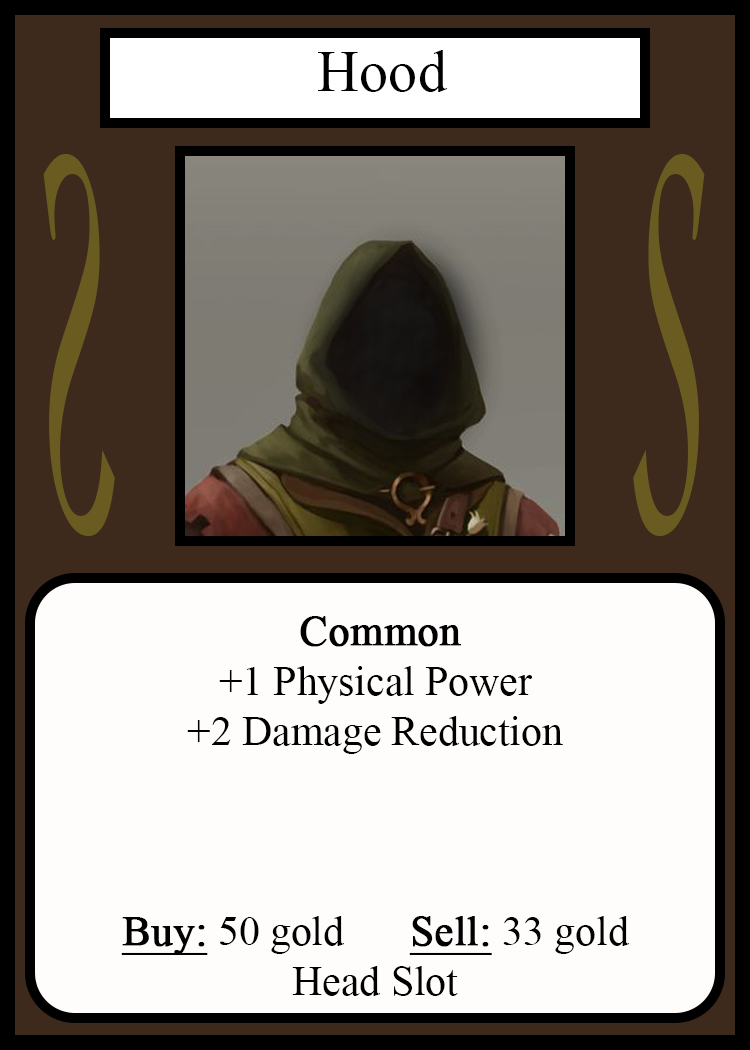
<style>
.page{position:relative;width:750px;height:1050px;background:#fffcfc}
.page>*{position:absolute;margin:0}
.t1{font:58.3px "TimesNewRomanPSMT";color:#010101}
.t2{font:548.5px "Apple-Chancery";color:#6a5c21;scale:0.27 1}
.t3{font:548.2px "Apple-Chancery";color:#6a5c21;scale:0.27 1}
.t4{font:41.7px "TimesNewRomanPSMT";color:#000000}
.t5{font:41.7px "TimesNewRomanPSMT";color:#000000;font-weight:bold}
.t6{font:41.7px "TimesNewRomanPSMT";color:#000000;font-weight:bold;text-decoration:underline}
</style>
<div class="page">
<p class="t1" style="left:318px;top:50px;width:130px;height:42px">Hood</p>
<p class="t2" style="left:43px;top:154px;width:72px;height:382px;rotate:180deg">S</p>
<p class="t3" style="left:633px;top:154px;width:72px;height:382px">S</p>
<p class="t4" style="left:121px;top:616px;width:509px;height:380px;text-align:center"><span class="t5">Common</span><br>+1 Physical Power<br>+2 Damage Reduction<br><br><br><br><span class="t6">Buy:</span> 50 gold   <span class="t6">Sell:</span> 33 gold<br>Head Slot</p>
</div>
